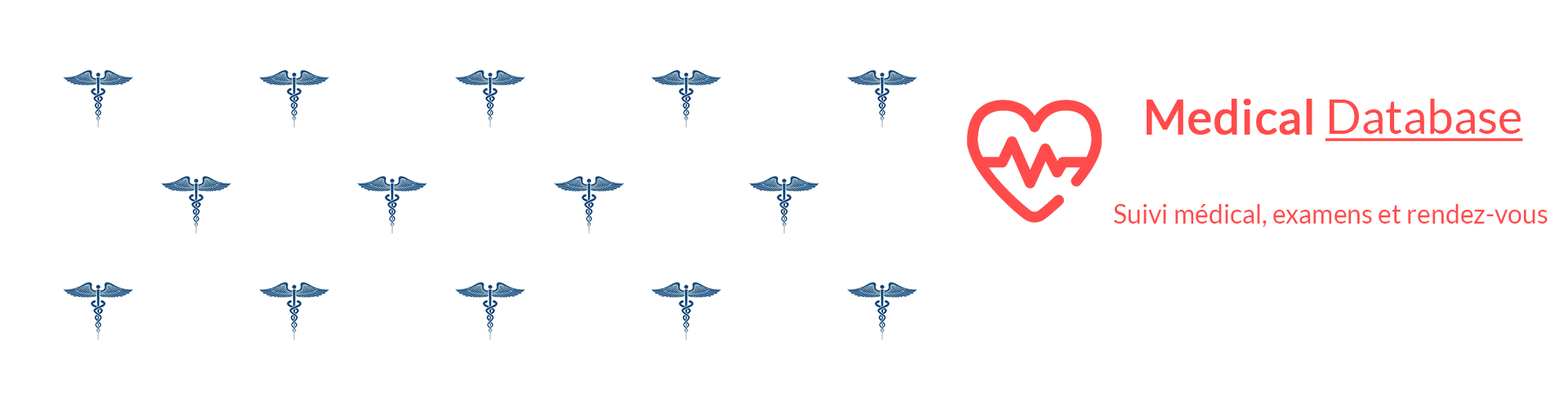
<style>
.page{position:relative;width:1568px;height:408px;background:#ffffff}
.page>*{position:absolute;margin:0}
.t1{font:47.4px "Lato-Regular";color:#ff4b4b;text-decoration:underline}
.t2{font:47.4px "Lato-Regular";color:#ff4b4b;font-weight:bold}
.t3{font:26.1px "Lato-Regular";color:#ff4b4b}
</style>
<div class="page">
<p class="t1" style="left:1147px;top:99px;width:376px;height:42px"><span class="t2">Medical </span>Database</p>
<p class="t3" style="left:1114px;top:204px;width:434px;height:24px">Suivi médical, examens et rendez-vous</p>
</div>
